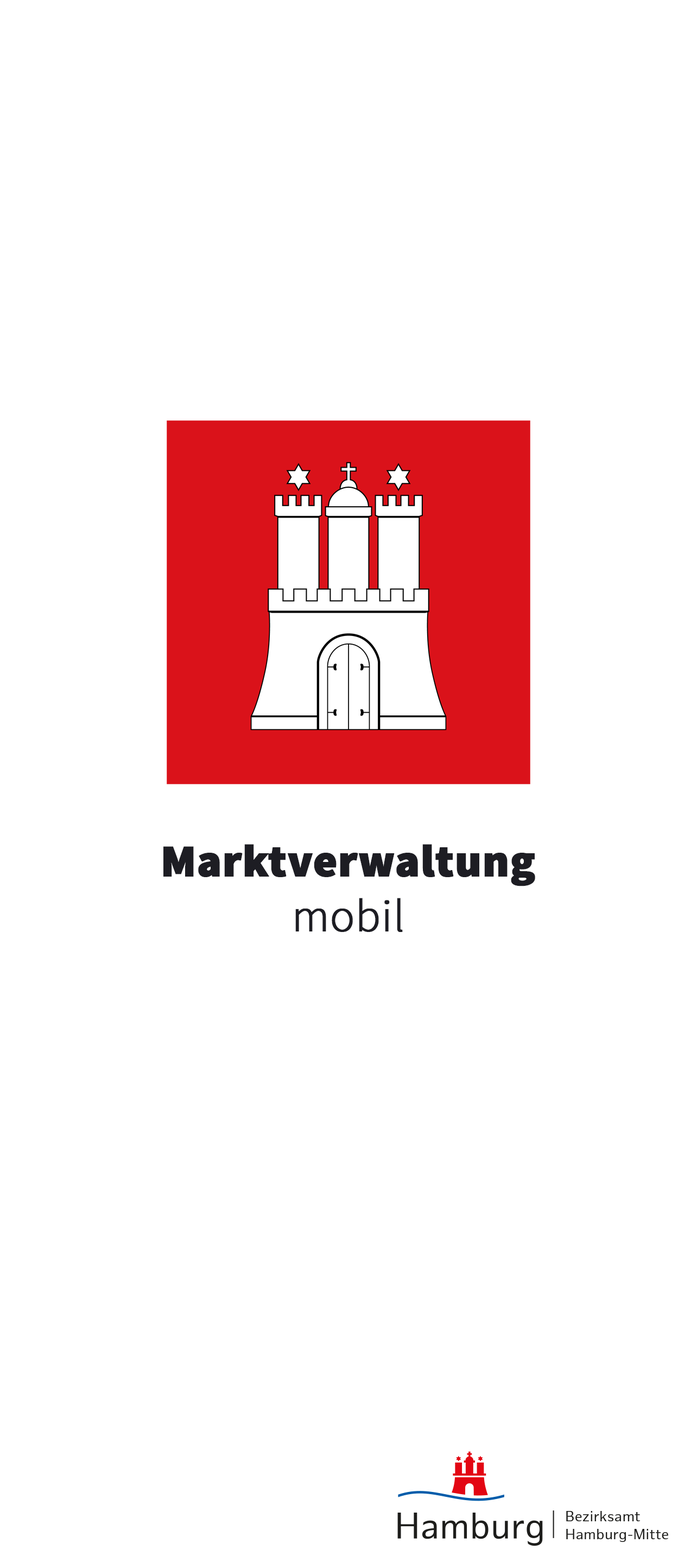
<style>
.page{position:relative;width:697px;height:1568px;background:#ffffff}
.page>*{position:absolute;margin:0}
.t1{font:45.6px "SourceSansPro-Black";color:#1d1d23;font-weight:bold}
.t2{font:45.6px "SourceSansPro-Light";color:#1d1d23;font-weight:bold}
</style>
<div class="page">
<p class="t1" style="left:163px;top:844px;width:373px;height:88px;text-align:center">Marktverwaltung<br><span class="t2">mobil</span></p>
</div>
